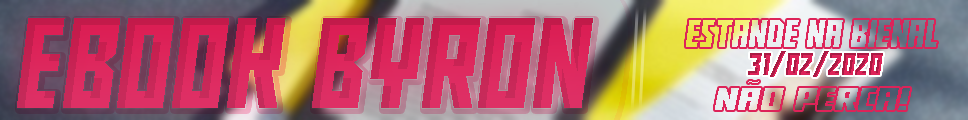
<style>
.page{position:relative;width:968px;height:120px}
.page>*{position:absolute;margin:0}
.t1{font:108.8px "Buran-USSR";scale:1.08 1}
.t2{font:32px "Buran-USSR";scale:1.14 1}
.t3{font:27.9px "Buran-USSR";scale:1.04 1}
.t4{font:27.4px "Buran-USSR";scale:1.74 1}
.t5{font:11.4px "TimesNewRomanPSMT";color:#ebecf0;scale:1.78 1}
</style>
<div class="page">
<p class="t1" style="left:17px;top:18px;width:576px;height:90px">EBOOK BYRON</p>
<p class="t2" style="left:686px;top:20px;width:251px;height:27px">ESTANDE NA BIENAL</p>
<p class="t3" style="left:748px;top:51px;width:135px;height:26px">31/02/2020</p>
<p class="t4" style="left:715px;top:88px;width:195px;height:22px">NAO PERCA!</p>
<p class="t5" style="left:748px;top:81px;width:11px;height:2px">~</p>
</div>
